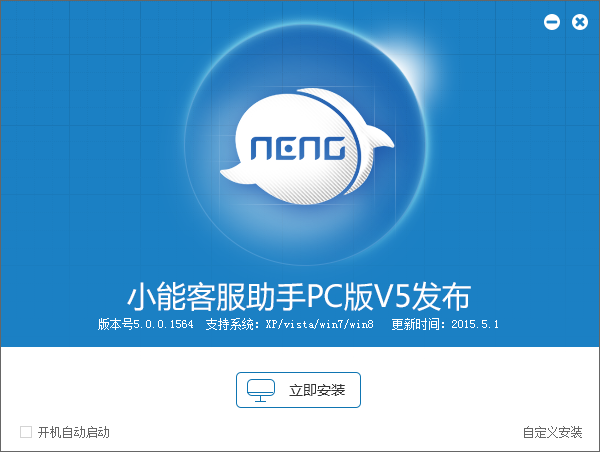
<style>
.page{position:relative;width:600px;height:452px;background:#1b80c4}
.page>*{position:absolute;margin:0}
.t1{font:30px "MicrosoftYaHei";color:#ffffff}
.t2{font:12px "SimSun";color:#ffffff}
.t3{font:14px "MicrosoftYaHei";color:#333333}
.t4{font:12px "SimSun";color:#666666}
</style>
<div class="page">
<p class="t1" style="left:127px;top:281px;width:344px;height:30px">小能客服助手PC版V5发布</p>
<p class="t2" style="left:98px;top:318px;width:400px;height:12px">版本号5.0.0.1564  支持系统：XP/vista/win7/win8   更新时间：2015.5.1</p>
<p class="t3" style="left:289px;top:384px;width:56px;height:12px">立即安装</p>
<p class="t4" style="left:38px;top:426px;width:71px;height:12px">开机自动启动</p>
<p class="t4" style="left:524px;top:426px;width:58px;height:12px">自定义安装</p>
</div>
